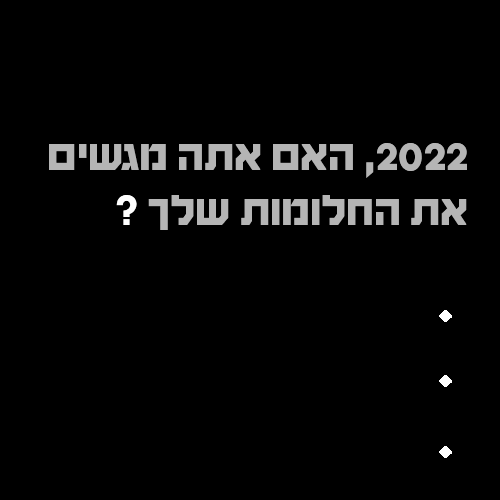
<style>
.page{position:relative;width:500px;height:500px;background:#000000}
.page>*{position:absolute;margin:0}
.t1{font:45.8px "HaimG-Regular";color:#b5b5b5}
.t2{font:45.8px "HaimG-Regular";color:#ffffff}
</style>
<div class="page">
<p class="t1" style="left:49px;top:143px;width:418px;height:87px">2022, האם אתה מגשים את החלומות שלך <span class="t2">?</span></p>
</div>
